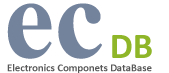
<style>
.page{position:relative;width:169px;height:73px;background:#ffffff}
.page>*{position:absolute;margin:0}
.t1{font:113.8px "TimesNewRomanPS-BoldMT";color:#74839c}
.t2{font:36.6px "Calibri-Bold";color:#8fb528}
.t3{font:10.7px "Calibri-Bold";color:#575757}
</style>
<div class="page">
<p class="t1" style="left:7px;top:3px;width:95px;height:56px">ec</p>
<p class="t2" style="left:112px;top:35px;width:40px;height:23px">DB</p>
<p class="t3" style="left:7px;top:64px;width:145px;height:9px">Electronics Componets DataBase</p>
</div>
